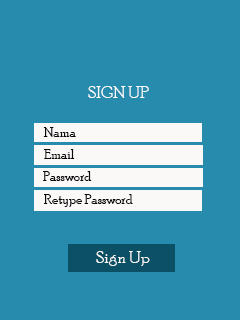
<style>
.page{position:relative;width:240px;height:320px;background:#268bac}
.page>*{position:absolute;margin:0}
.t1{font:18px "PoorRichard-Regular";color:#ffffff}
.t2{font:14px "PoorRichard-Regular";color:#080808}
.t3{font:14px "PoorRichard-Regular";color:#090909}
.t4{font:14px "PoorRichard-Regular";color:#0a0a0a}
</style>
<div class="page">
<p class="t1" style="left:88px;top:86px;width:61px;height:12px">SIGN UP</p>
<p class="t2" style="left:43px;top:127px;width:33px;height:10px">Nama</p>
<p class="t3" style="left:44px;top:149px;width:31px;height:10px">Email</p>
<p class="t4" style="left:43px;top:171px;width:49px;height:10px">Password</p>
<p class="t3" style="left:44px;top:194px;width:89px;height:13px">Retype Password</p>
<p class="t1" style="left:96px;top:251px;width:54px;height:15px">Sign Up</p>
</div>
